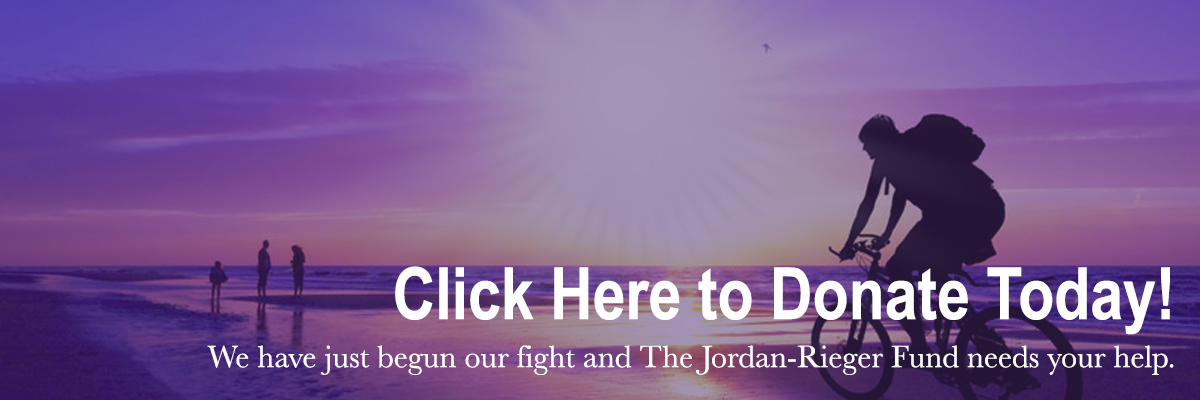
<style>
.page{position:relative;width:1200px;height:400px}
.page>*{position:absolute;margin:0}
.t1{font:32px/48px "Baskerville";color:#ffffff}
.t2{font:72px "ArialNarrow-Bold";color:#ffffff}
</style>
<div class="page">
<p class="t1" style="left:207px;top:266px;width:967px;height:109px;text-align:right"><span class="t2">Click Here to Donate Today!<br></span>We have just begun our fight and The Jordan-Rieger Fund needs your help.</p>
</div>
